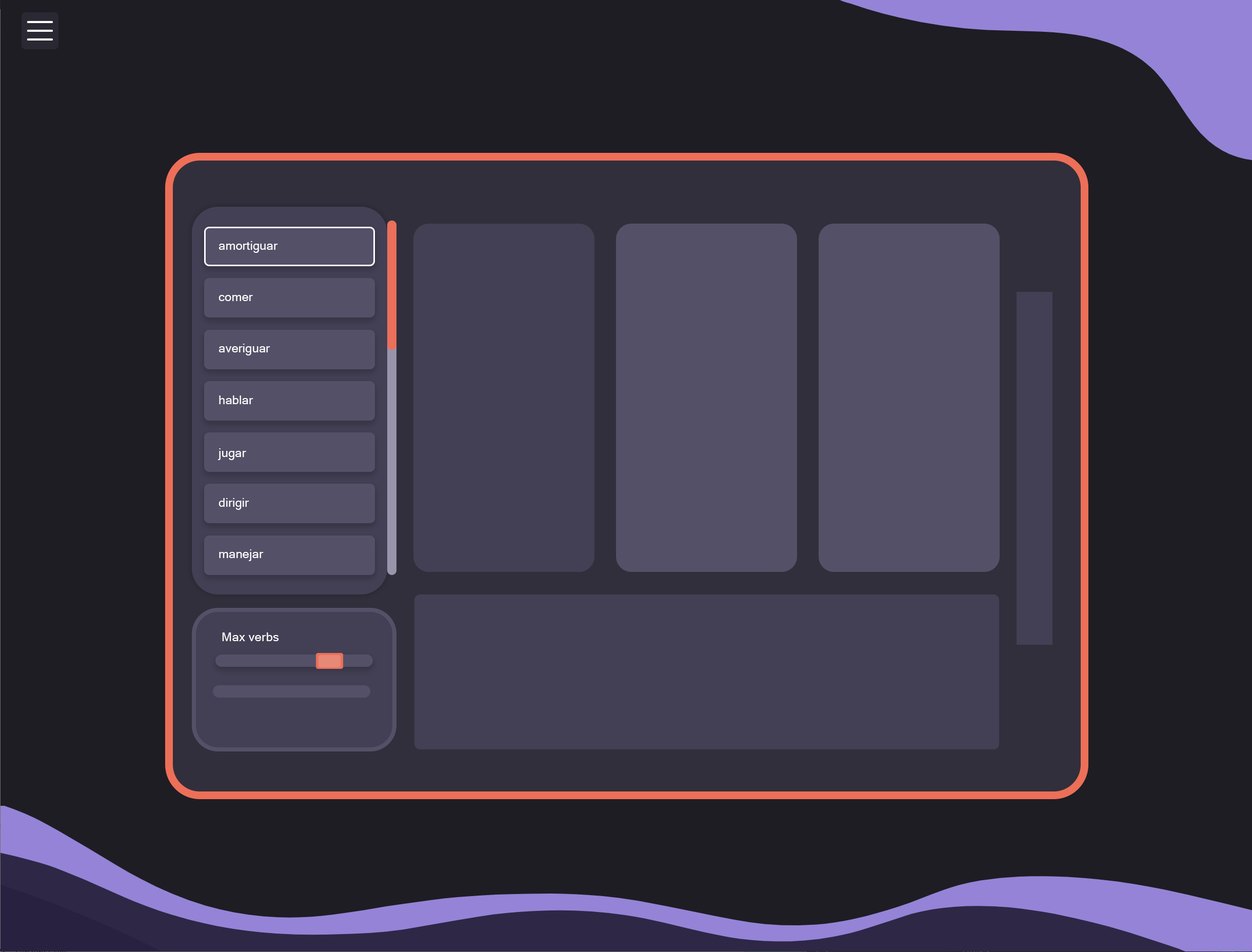
<style>
.page{position:relative;width:1252px;height:952px;background:#1e1d23}
.page>*{position:absolute;margin:0}
.t1{font:12.3px "MicrosoftSansSerif";color:#ffffff}
</style>
<div class="page">
<p class="t1" style="left:219px;top:241px;width:59px;height:12px">amortiguar</p>
<p class="t1" style="left:219px;top:295px;width:34px;height:6px">comer</p>
<p class="t1" style="left:219px;top:344px;width:51px;height:12px">averiguar</p>
<p class="t1" style="left:219px;top:396px;width:34px;height:8px">hablar</p>
<p class="t1" style="left:218px;top:448px;width:28px;height:12px">jugar</p>
<p class="t1" style="left:219px;top:498px;width:30px;height:12px">dirigir</p>
<p class="t1" style="left:219px;top:549px;width:45px;height:12px">manejar</p>
</div>
